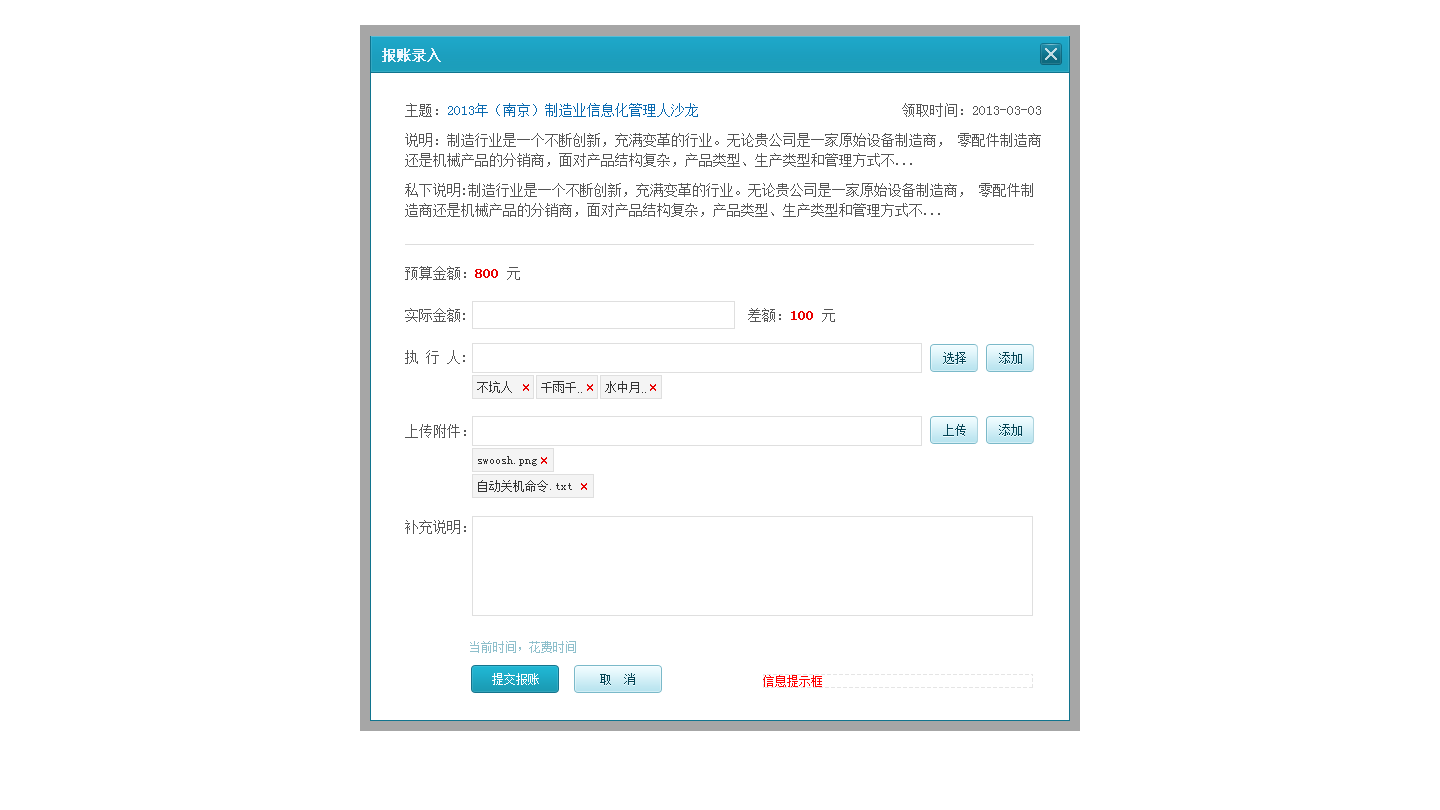
<style>
.page{position:relative;width:1440px;height:810px;background:#ffffff}
.page>*{position:absolute;margin:0}
.t1{font:14px "SimSun";color:#eef7fe;font-weight:bold}
.t2{font:14px/20px "SimSun";color:#555555}
.t3{font:14px/30px "SimSun";color:#555555}
.t4{font:14px/30px "SimSun";color:#0869b0}
.t5{font:14px/42px "SimSun";color:#555555}
.t6{font:14px/42px "SimSun";color:#e90000;font-weight:bold}
.t7{font:14px/48px "SimSun";color:#555555}
.t8{font:12px "SimSun";color:#044455}
.t9{font:12px "SimSun";color:#333333}
.t10{font:12px "SimSun";color:#8fc0cc}
.t11{font:12px "SimSun";color:#ffffff}
</style>
<div class="page">
<p class="t1" style="left:382px;top:48px;width:59px;height:14px">报账录入</p>
<p class="t2" style="left:405px;top:103px;width:636px;height:114px"><span class="t3">主题：</span><span class="t4">2013年（南京）制造业信息化管理人沙龙                             </span><span class="t3">领取时间：2013-03-03<br></span>说明：制造行业是一个不断创新，充满变革的行业。无论贵公司是一家原始设备制造商， 零配件制造商<br><span class="t3">还是机械产品的分销商，面对产品结构复杂，产品类型、生产类型和管理方式不...<br></span>私下说明:制造行业是一个不断创新，充满变革的行业。无论贵公司是一家原始设备制造商， 零配件制<br>造商还是机械产品的分销商，面对产品结构复杂，产品类型、生产类型和管理方式不...</p>
<p class="t5" style="left:405px;top:266px;width:430px;height:268px">预算金额：<span class="t6">800 </span>元<br>实际金额:                                        差额：<span class="t6">100 </span>元<br>执 行 人: <br><br><span class="t7">上传附件：<br><br>补充说明：</span></p>
<p class="t8" style="left:943px;top:352px;width:23px;height:12px">选择</p>
<p class="t8" style="left:999px;top:352px;width:23px;height:12px">添加</p>
<p class="t9" style="left:477px;top:381px;width:35px;height:12px">不坑人</p>
<p class="t9" style="left:541px;top:381px;width:35px;height:12px">千雨千</p>
<p class="t9" style="left:605px;top:381px;width:34px;height:12px">水中月</p>
<p class="t8" style="left:943px;top:424px;width:23px;height:12px">上传</p>
<p class="t8" style="left:999px;top:424px;width:23px;height:12px">添加</p>
<p class="t9" style="left:478px;top:456px;width:59px;height:10px">swoosh.png</p>
<p class="t9" style="left:478px;top:480px;width:94px;height:12px">自动关机命令.txt</p>
<p class="t10" style="left:470px;top:641px;width:106px;height:12px">当前时间，花费时间</p>
<p class="t11" style="left:492px;top:673px;width:47px;height:12px">提交报账</p>
<p class="t8" style="left:600px;top:673px;width:35px;height:12px">取  消</p>
</div>
